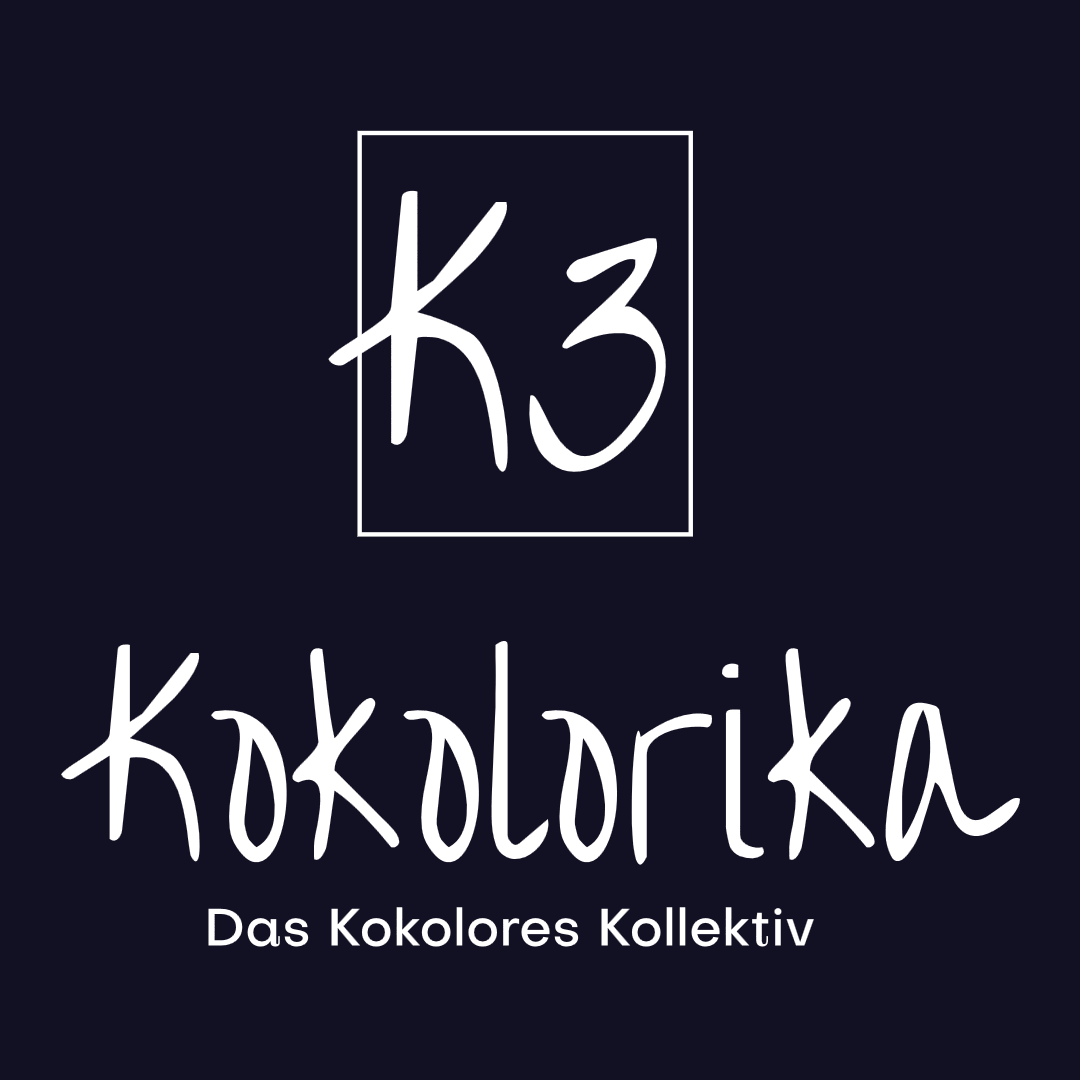
<style>
.page{position:relative;width:1080px;height:1080px;background:#121023}
.page>*{position:absolute;margin:0}
.t1{font:308.9px "OvertheRainbow";color:#ffffff}
.t2{font:238.6px "OvertheRainbow";color:#ffffff}
.t3{font:51.8px "Subjectivity-Medium";color:#ffffff}
</style>
<div class="page">
<p class="t1" style="left:328px;top:190px;width:338px;height:282px">K3</p>
<p class="t2" style="left:61px;top:641px;width:959px;height:224px">Kokolorika</p>
<p class="t3" style="left:208px;top:907px;width:606px;height:40px">Das Kokolores Kollektiv</p>
</div>
